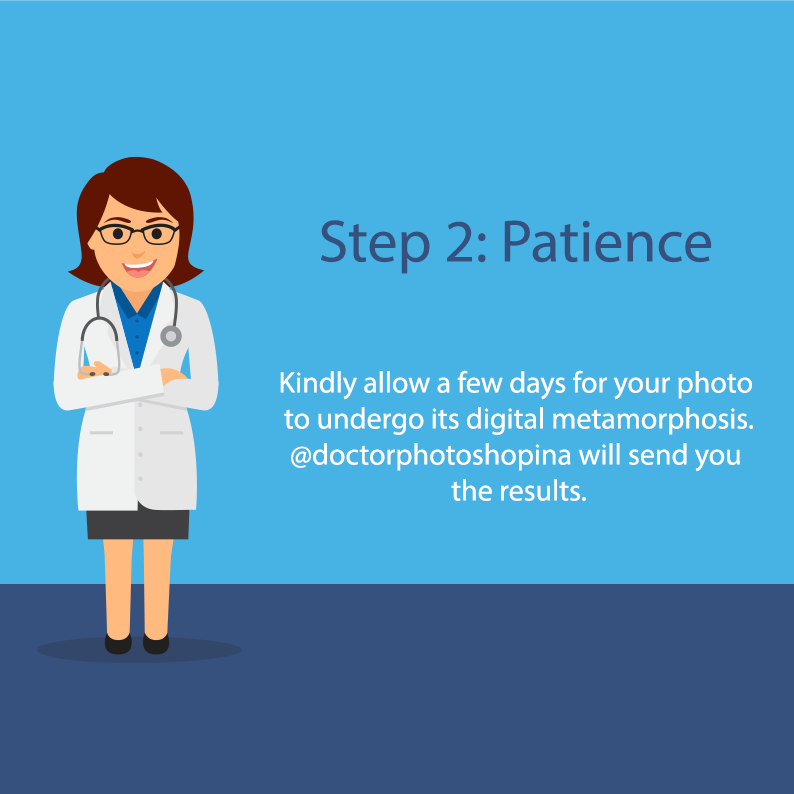
<style>
.page{position:relative;width:794px;height:794px;background:#47b2e4}
.page>*{position:absolute;margin:0}
.t1{font:60px "MyriadPro-Regular";color:#37517e}
.t2{font:30px "MyriadPro-Regular";color:#ffffff}
</style>
<div class="page">
<p class="t1" style="left:321px;top:220px;width:391px;height:54px">Step 2: Patience</p>
<p class="t2" style="left:280px;top:370px;width:473px;height:131px;text-align:center">Kindly allow a few days for your photo <br>to undergo its digital metamorphosis.<br>@doctorphotoshopina will send you <br>the results.</p>
</div>
